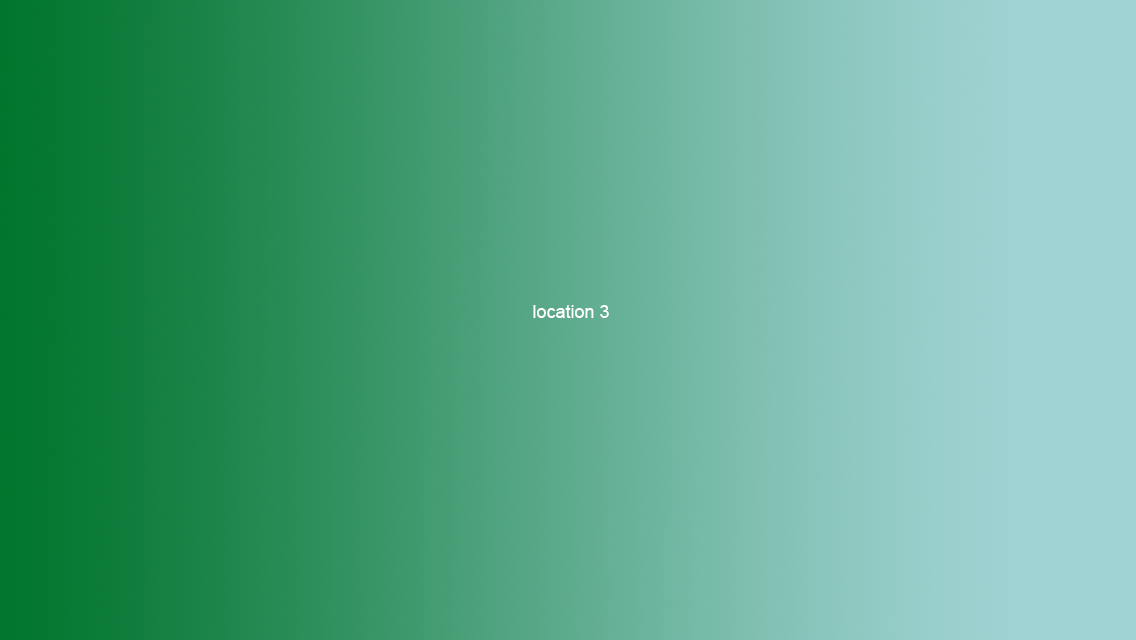
<style>
.page{position:relative;width:1136px;height:640px}
.page>*{position:absolute;margin:0}
.t1{font:18px "ArialMT";color:#ffffff}
</style>
<div class="page">
<p class="t1" style="left:533px;top:305px;width:76px;height:13px">location 3</p>
</div>
